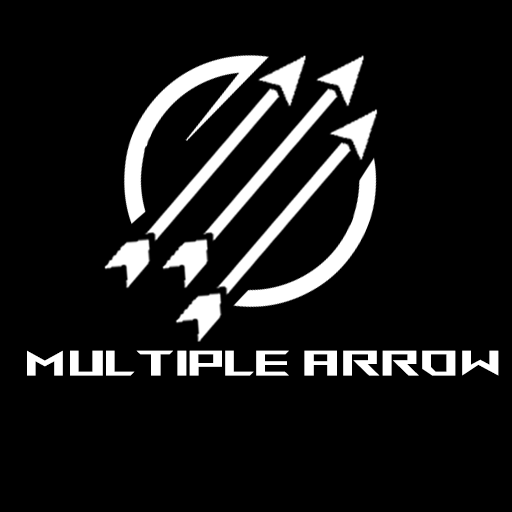
<style>
.page{position:relative;width:512px;height:512px;background:#000000}
.page>*{position:absolute;margin:0}
.t1{font:35.4px "AniMeMatrix-MB_EN";color:#ffffff;scale:1.18 1}
</style>
<div class="page">
<p class="t1" style="left:27px;top:350px;width:472px;height:26px">MULTIple arrow</p>
</div>
